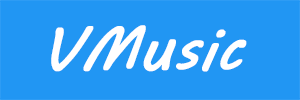
<style>
.page{position:relative;width:300px;height:100px;background:#2196f3}
.page>*{position:absolute;margin:0}
.t1{font:60px "MVBoli";color:#ffffff;font-weight:bold;font-style:italic}
</style>
<div class="page">
<p class="t1" style="left:51px;top:25px;width:196px;height:47px">VMusic</p>
</div>
